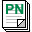
<style>
.page{position:relative;width:32px;height:32px;background:#ffffff}
.page>*{position:absolute;margin:0}
.t1{font:14px "Arial-BoldMT";color:#00874b}
</style>
<div class="page">
<p class="t1" style="left:6px;top:4px;width:18px;height:10px">PN</p>
</div>
